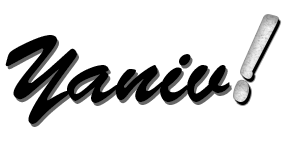
<style>
.page{position:relative;width:300px;height:141px;background:#ffffff}
.page>*{position:absolute;margin:0}
.t1{font:95.8px "BrushScriptStd";color:#000000}
</style>
<div class="page">
<p class="t1" style="left:5px;top:35px;width:225px;height:89px">Yaniv</p>
</div>
